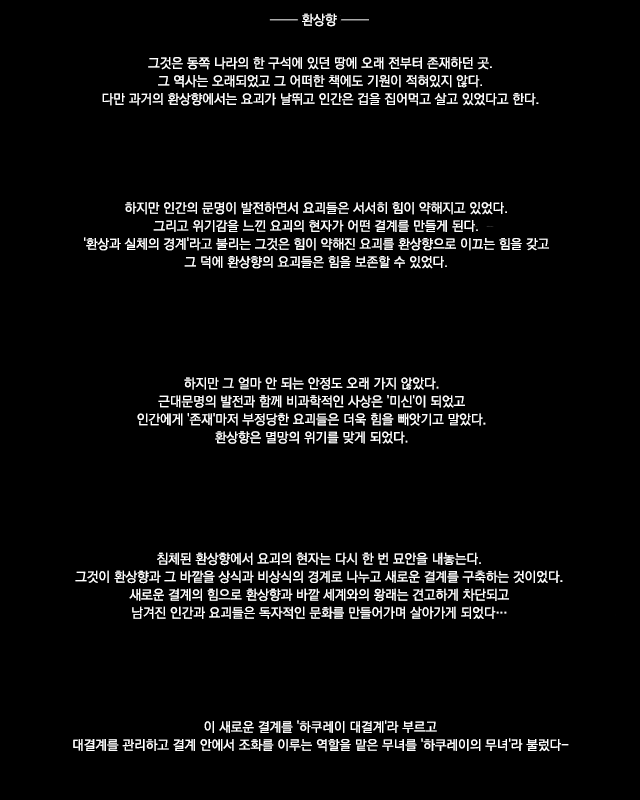
<style>
.page{position:relative;width:640px;height:800px;background:#000000}
.page>*{position:absolute;margin:0}
.t1{font:13.5px "KoPubDotumMedium";color:#ffffff}
.t2{font:13.3px/18px "KoPubDotumMedium";color:#ffffff}
</style>
<div class="page">
<p class="t1" style="left:302px;top:13px;width:35px;height:14px">환상향</p>
<p class="t2" style="left:102px;top:57px;width:437px;height:49px;text-align:center">그것은 동쪽 나라의 한 구석에 있던 땅에 오래 전부터 존재하던 곳.<br>그 역사는 오래되었고 그 어떠한 책에도 기원이 적혀있지 않다.<br>다만 과거의 환상향에서는 요괴가 날뛰고 인간은 겁을 집어먹고 살고 있었다고 한다.</p>
<p class="t2" style="left:84px;top:202px;width:465px;height:67px;text-align:center">하지만 인간의 문명이 발전하면서 요괴들은 서서히 힘이 약해지고 있었다.<br>그리고 위기감을 느낀 요괴의 현자가 어떤 결계를 만들게 된다.<br>'환상과 실체의 경계'라고 불리는 그것은 힘이 약해진 요괴를 환상향으로 이끄는 힘을 갖고<br>그 덕에 환상향의 요괴들은 힘을 보존할 수 있었다.</p>
<p class="t2" style="left:137px;top:377px;width:349px;height:67px;text-align:center">하지만 그 얼마 안 되는 안정도 오래 가지 않았다.<br>근대문명의 발전과 함께 비과학적인 사상은 '미신'이 되었고<br>인간에게 '존재'마저 부정당한 요괴들은 더욱 힘을 빼앗기고 말았다.<br>환상향은 멸망의 위기를 맞게 되었다.</p>
<p class="t2" style="left:75px;top:552px;width:488px;height:67px;text-align:center">침체된 환상향에서 요괴의 현자는 다시 한 번 묘안을 내놓는다.<br>그것이 환상향과 그 바깥을 상식과 비상식의 경계로 나누고 새로운 결계를 구축하는 것이었다.<br>새로운 결계의 힘으로 환상향과 바깥 세계와의 왕래는 견고하게 차단되고<br>남겨진 인간과 요괴들은 독자적인 문화를 만들어가며 살아가게 되었다…</p>
<p class="t2" style="left:73px;top:720px;width:496px;height:32px;text-align:center">이 새로운 결계를 '하쿠레이 대결계'라 부르고<br>대결계를 관리하고 결계 안에서 조화를 이루는 역할을 맡은 무녀를 '하쿠레이의 무녀'라 불렀다-</p>
</div>
